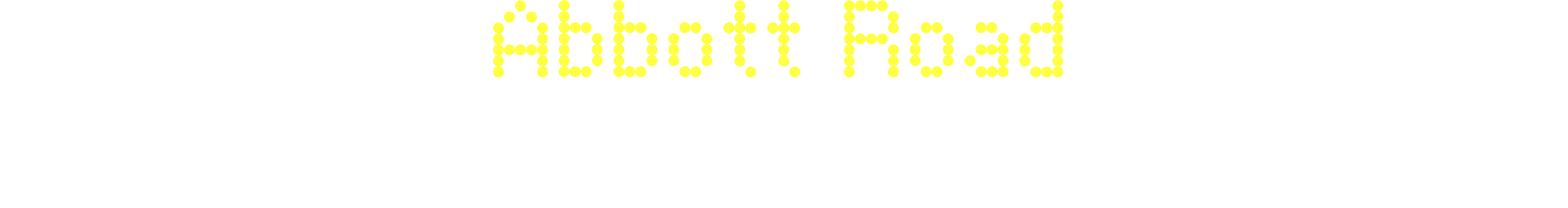
<style>
.page{position:relative;width:1568px;height:208px;background:#ffffff}
.page>*{position:absolute;margin:0}
.t1{font:85.5px "Newibusfont-Regular";letter-spacing:-0.006em;color:#ffff43}
</style>
<div class="page">
<p class="t1" style="left:493px;top:0px;width:571px;height:78px">Abbott Road</p>
</div>
